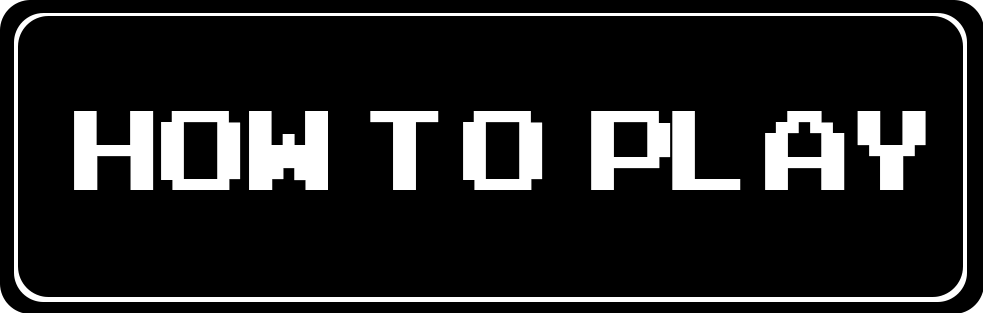
<style>
.page{position:relative;width:983px;height:313px;background:#000000}
.page>*{position:absolute;margin:0}
.t1{font:158.3px "ArcadeClassic";color:#ffffff}
</style>
<div class="page">
<p class="t1" style="left:74px;top:111px;width:852px;height:79px">HOW  TO  PLAY</p>
</div>
